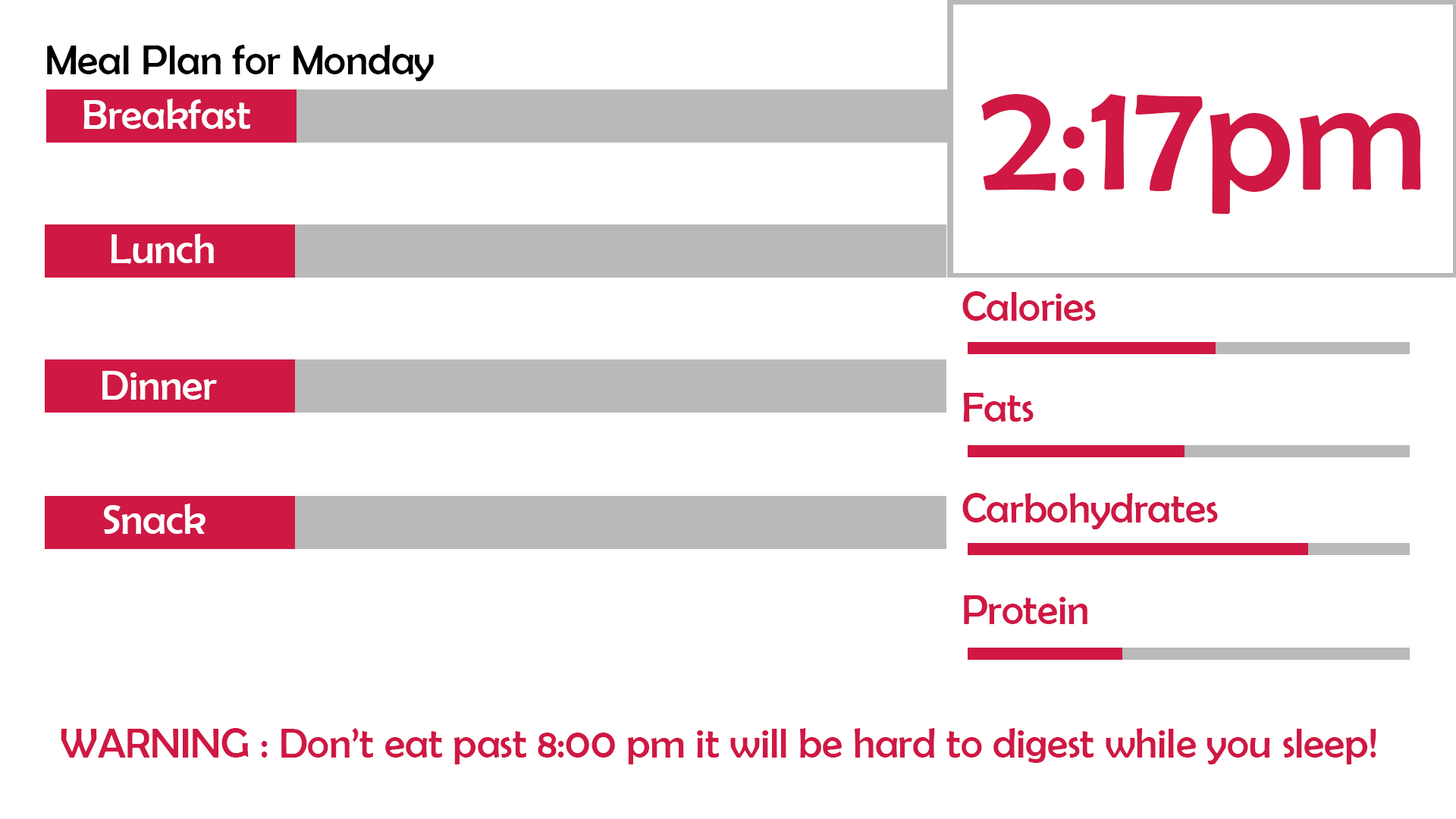
<style>
.page{position:relative;width:1456px;height:819px;background:#ffffff}
.page>*{position:absolute;margin:0}
.t1{font:42.1px "BerlinSansFB-Reg";color:#000000}
.t2{font:42.1px "BerlinSansFB-Reg";color:#ffffff}
.t3{font:159.3px "BerlinSansFB-Reg";color:#cf1844}
.t4{font:42.1px "BerlinSansFB-Reg";color:#cf1844}
</style>
<div class="page">
<p class="t1" style="left:47px;top:45px;width:387px;height:36px">Meal Plan for Monday</p>
<p class="t2" style="left:83px;top:99px;width:167px;height:30px">Breakfast</p>
<p class="t3" style="left:981px;top:94px;width:440px;height:120px">2:17pm</p>
<p class="t2" style="left:111px;top:234px;width:103px;height:30px">Lunch</p>
<p class="t4" style="left:962px;top:291px;width:256px;height:333px">Calories<br><br>Fats<br><br>Carbohydrates<br><br>Protein</p>
<p class="t2" style="left:102px;top:371px;width:115px;height:29px">Dinner</p>
<p class="t2" style="left:104px;top:504px;width:102px;height:30px">Snack</p>
<p class="t4" style="left:61px;top:728px;width:1315px;height:36px">WARNING : Don’t eat past 8:00 pm it will be hard to digest while you sleep!</p>
</div>
